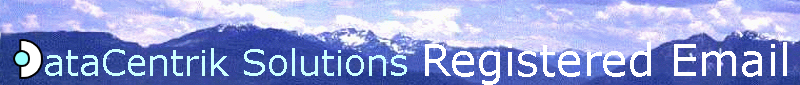
<style>
.page{position:relative;width:800px;height:85px}
.page>*{position:absolute;margin:0}
.t1{font:36px "Verdana";color:#ccffff}
.t2{font:44px "Verdana";color:#ffffff}
</style>
<div class="page">
<p class="t1" style="left:45px;top:42px;width:742px;height:43px">ataCentrik Solutions <span class="t2">Registered Email</span></p>
</div>
